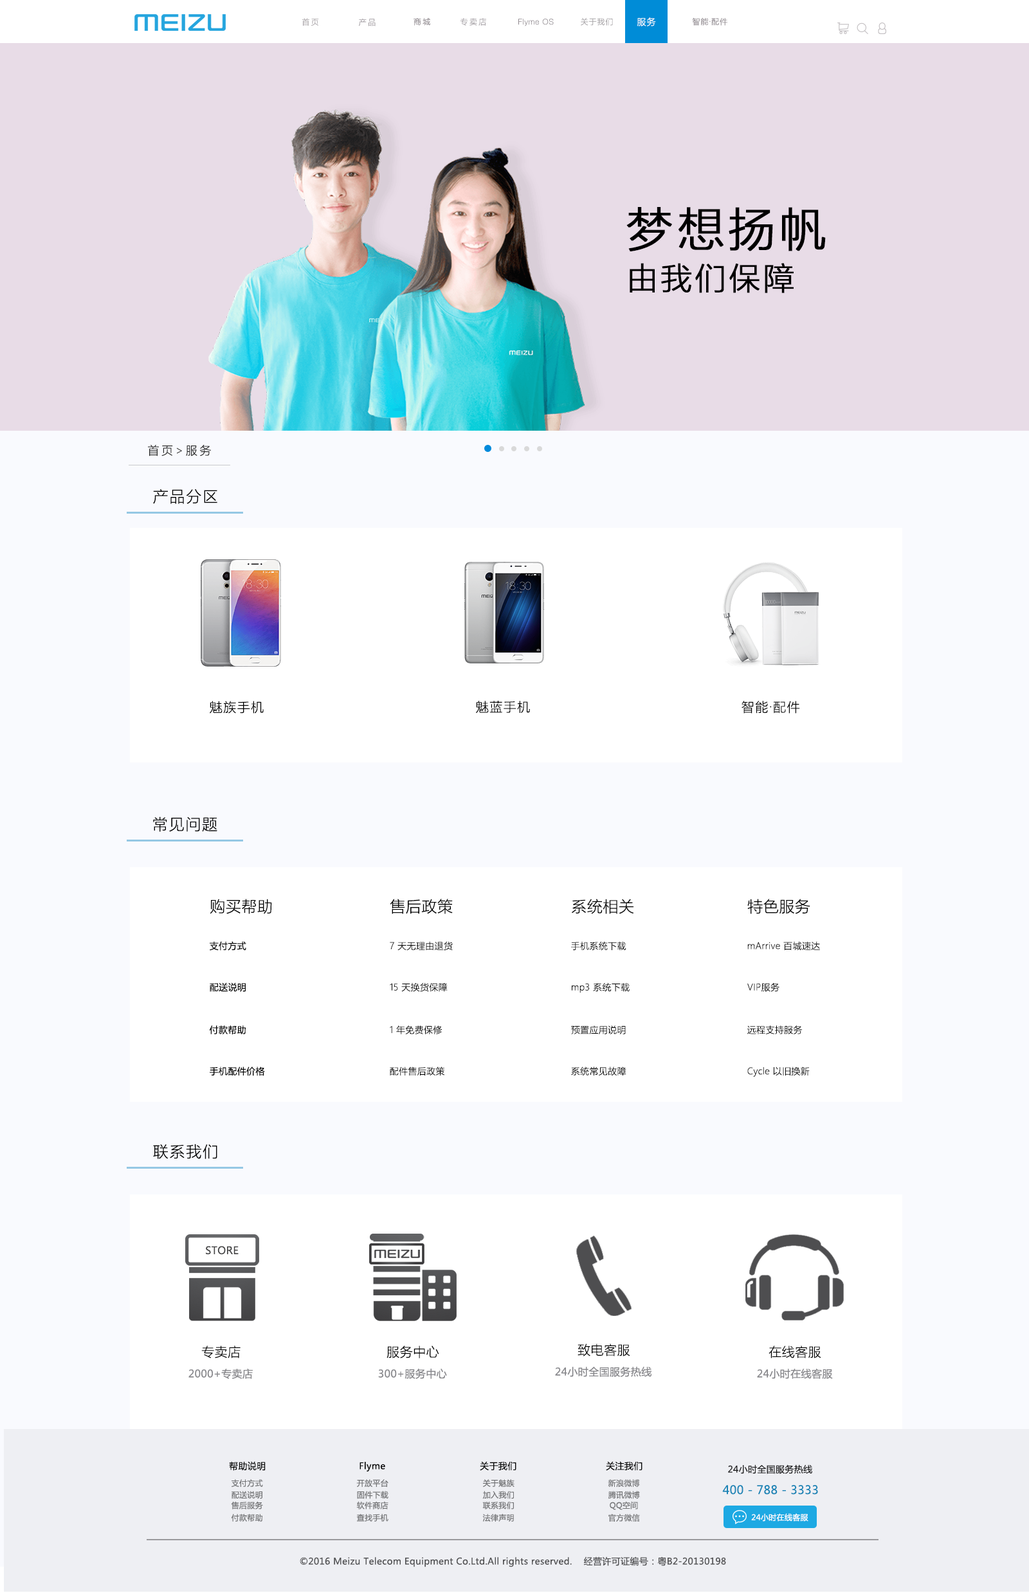
<style>
.page{position:relative;width:1029px;height:1593px;background:#ffffff}
.page>*{position:absolute;margin:0}
.t1{font:7.7px "MicrosoftYaHeiLight";letter-spacing:0.2em;color:#8b848a}
.t2{font:9px "MicrosoftYaHeiLight";letter-spacing:0.075em;color:#ffffff}
.t3{font:7.7px "MicrosoftYaHeiLight";letter-spacing:0.075em;color:#8b848a}
.t4{font:7.7px "MicrosoftYaHeiLight";letter-spacing:0.2em;color:#a7a2a6}
.t5{font:7.7px "MicrosoftYaHeiLight";letter-spacing:0.2em;color:#9f999e}
.t6{font:7.7px "MicrosoftYaHeiLight";letter-spacing:0.2em;color:#a6a1a6}
.t7{font:7.7px "HelveticaNeueLTPro-Th";letter-spacing:0.075em;color:#8b848a}
.t8{font:7.7px "MicrosoftYaHeiLight";letter-spacing:0.075em;color:#a5a2a5}
.t9{font:46.3px "MicrosoftYaHeiLight";letter-spacing:0.075em;color:#000000;font-weight:bold}
.t10{font:30.9px "MicrosoftYaHeiLight";letter-spacing:0.075em;color:#000000;font-weight:bold}
.t11{font:11.6px "MicrosoftYaHeiLight";letter-spacing:0.2em;color:#282828}
.t12{font:15.4px "MicrosoftYaHeiLight";letter-spacing:0.075em;color:#000000}
.t13{font:12.9px "MicrosoftYaHeiLight";letter-spacing:0.075em;color:#000000}
.t14{font:15.4px "MicrosoftYaHeiLight";letter-spacing:0.025em;color:#020202}
.t15{font:9px "MicrosoftYaHei";letter-spacing:0.025em;color:#010101}
.t16{font:9px "MicrosoftYaHeiLight";letter-spacing:0.025em;color:#010101}
.t17{font:10.2px "MicrosoftYaHei";letter-spacing:0.025em;color:#444445}
.t18{font:12.9px "MicrosoftYaHeiLight";letter-spacing:0.025em;color:#000000}
.t19{font:10.3px "MicrosoftYaHei";letter-spacing:0.025em;color:#87878b}
.t20{font:9px "MicrosoftYaHei";letter-spacing:0.025em;color:#020202}
.t21{font:9px "MicrosoftYaHei";letter-spacing:0.025em;color:#212122}
.t22{font:7.7px "MicrosoftYaHei";letter-spacing:0.025em;color:#737476}
.t23{font:11.6px "MicrosoftYaHei";letter-spacing:0.025em;color:#1a85b6}
.t24{font:7.7px "MicrosoftYaHei";letter-spacing:0.025em;color:#ffffff}
.t25{font:9px "MicrosoftYaHei";letter-spacing:0.025em;color:#525254}
</style>
<div class="page">
<p class="t1" style="left:413px;top:17px;width:17px;height:9px">商城</p>
<p class="t2" style="left:636px;top:17px;width:20px;height:9px">服务</p>
<p class="t3" style="left:692px;top:17px;width:35px;height:9px">智能·配件</p>
<p class="t4" style="left:302px;top:18px;width:17px;height:8px">首页</p>
<p class="t5" style="left:359px;top:18px;width:16px;height:8px">产品</p>
<p class="t6" style="left:460px;top:18px;width:26px;height:8px">专卖店</p>
<p class="t7" style="left:518px;top:19px;width:36px;height:7px">Flyme OS</p>
<p class="t8" style="left:580px;top:18px;width:33px;height:8px">关于我们</p>
<p class="t9" style="left:626px;top:207px;width:199px;height:44px">梦想扬帆</p>
<p class="t10" style="left:629px;top:263px;width:164px;height:30px">由我们保障</p>
<p class="t11" style="left:148px;top:445px;width:63px;height:11px">首页&gt;服务</p>
<p class="t12" style="left:153px;top:489px;width:64px;height:15px">产品分区</p>
<p class="t13" style="left:210px;top:701px;width:54px;height:13px">魅族手机</p>
<p class="t13" style="left:476px;top:701px;width:54px;height:13px">魅蓝手机</p>
<p class="t13" style="left:741px;top:701px;width:59px;height:13px">智能·配件</p>
<p class="t12" style="left:153px;top:816px;width:64px;height:16px">常见问题</p>
<p class="t14" style="left:210px;top:899px;width:62px;height:15px">购买帮助</p>
<p class="t14" style="left:390px;top:899px;width:63px;height:15px">售后政策</p>
<p class="t14" style="left:572px;top:899px;width:62px;height:15px">系统相关</p>
<p class="t14" style="left:747px;top:899px;width:63px;height:15px">特色服务</p>
<p class="t15" style="left:210px;top:941px;width:36px;height:10px">支付方式</p>
<p class="t16" style="left:390px;top:941px;width:63px;height:10px">7 天无理由退货</p>
<p class="t16" style="left:571px;top:941px;width:55px;height:10px">手机系统下载</p>
<p class="t16" style="left:747px;top:941px;width:73px;height:9px">mArrive 百城速达</p>
<p class="t15" style="left:210px;top:982px;width:36px;height:10px">配送说明</p>
<p class="t16" style="left:390px;top:982px;width:57px;height:10px">15 天换货保障</p>
<p class="t16" style="left:572px;top:983px;width:57px;height:10px">mp3 系统下载</p>
<p class="t16" style="left:747px;top:983px;width:32px;height:9px">VIP服务</p>
<p class="t15" style="left:209px;top:1025px;width:37px;height:9px">付款帮助</p>
<p class="t16" style="left:390px;top:1025px;width:52px;height:9px">1 年免费保修</p>
<p class="t16" style="left:571px;top:1025px;width:55px;height:9px">预置应用说明</p>
<p class="t16" style="left:747px;top:1025px;width:55px;height:9px">远程支持服务</p>
<p class="t15" style="left:210px;top:1066px;width:55px;height:10px">手机配件价格</p>
<p class="t16" style="left:390px;top:1066px;width:55px;height:10px">配件售后政策</p>
<p class="t16" style="left:571px;top:1066px;width:55px;height:10px">系统常见故障</p>
<p class="t16" style="left:747px;top:1066px;width:62px;height:11px">Cycle 以旧换新</p>
<p class="t12" style="left:153px;top:1144px;width:64px;height:15px">联系我们</p>
<p class="t17" style="left:206px;top:1246px;width:33px;height:9px">STORE</p>
<p class="t18" style="left:201px;top:1346px;width:39px;height:12px">专卖店</p>
<p class="t18" style="left:386px;top:1346px;width:53px;height:12px">服务中心</p>
<p class="t18" style="left:577px;top:1344px;width:53px;height:12px">致电客服</p>
<p class="t18" style="left:768px;top:1346px;width:53px;height:12px">在线客服</p>
<p class="t19" style="left:188px;top:1369px;width:65px;height:10px">2000+专卖店</p>
<p class="t19" style="left:378px;top:1369px;width:69px;height:10px">300+服务中心</p>
<p class="t19" style="left:555px;top:1367px;width:97px;height:10px">24小时全国服务热线</p>
<p class="t19" style="left:757px;top:1369px;width:76px;height:10px">24小时在线客服</p>
<p class="t20" style="left:229px;top:1461px;width:37px;height:10px">帮助说明</p>
<p class="t20" style="left:359px;top:1462px;width:26px;height:10px">Flyme</p>
<p class="t20" style="left:480px;top:1461px;width:36px;height:10px">关于我们</p>
<p class="t20" style="left:606px;top:1461px;width:36px;height:10px">关注我们</p>
<p class="t21" style="left:728px;top:1464px;width:84px;height:10px">24小时全国服务热线</p>
<p class="t22" style="left:231px;top:1479px;width:32px;height:8px">支付方式</p>
<p class="t22" style="left:356px;top:1479px;width:32px;height:9px">开放平台</p>
<p class="t22" style="left:483px;top:1479px;width:31px;height:8px">关于魅族</p>
<p class="t22" style="left:608px;top:1479px;width:32px;height:8px">新浪微博</p>
<p class="t22" style="left:231px;top:1491px;width:31px;height:8px">配送说明</p>
<p class="t22" style="left:357px;top:1491px;width:31px;height:8px">固件下载</p>
<p class="t22" style="left:482px;top:1491px;width:32px;height:8px">加入我们</p>
<p class="t22" style="left:608px;top:1491px;width:32px;height:8px">腾讯微博</p>
<p class="t23" style="left:722px;top:1485px;width:96px;height:10px">400 - 788 - 3333</p>
<p class="t22" style="left:231px;top:1501px;width:32px;height:8px">售后服务</p>
<p class="t22" style="left:356px;top:1501px;width:32px;height:8px">软件商店</p>
<p class="t22" style="left:482px;top:1502px;width:32px;height:7px">联系我们</p>
<p class="t22" style="left:609px;top:1501px;width:29px;height:9px">QQ空间</p>
<p class="t22" style="left:231px;top:1514px;width:31px;height:8px">付款帮助</p>
<p class="t22" style="left:356px;top:1514px;width:32px;height:8px">查找手机</p>
<p class="t22" style="left:482px;top:1514px;width:32px;height:8px">法律声明</p>
<p class="t22" style="left:608px;top:1514px;width:32px;height:8px">官方微信</p>
<p class="t24" style="left:751px;top:1513px;width:57px;height:9px">24小时在线客服</p>
<p class="t25" style="left:300px;top:1556px;width:426px;height:11px">©2016 Meizu Telecom Equipment Co.Ltd.All rights reserved.    经营许可证编号：粤B2-20130198</p>
</div>
